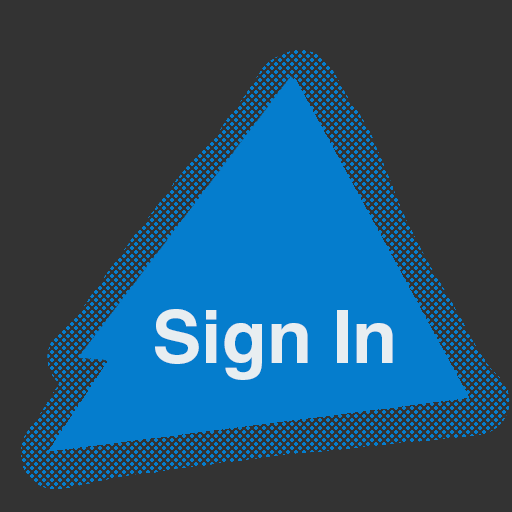
<style>
.page{position:relative;width:512px;height:512px;background:#333333}
.page>*{position:absolute;margin:0}
.t1{font:73.5px "Helvetica-Bold";color:#e8eef1}
</style>
<div class="page">
<p class="t1" style="left:155px;top:309px;width:238px;height:71px">Sign In</p>
</div>
